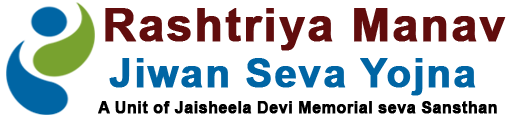
<style>
.page{position:relative;width:509px;height:122px;background:#ffffff}
.page>*{position:absolute;margin:0}
.t1{font:46px "Arial-BoldMT";letter-spacing:0.03em;color:#610d0d;font-weight:bold}
.t2{font:40px "Arial-BoldMT";letter-spacing:0.03em;color:#0065a4;font-weight:bold}
.t3{font:16px "Arial-BoldMT";letter-spacing:0.01em;color:#000000;font-weight:bold}
</style>
<div class="page">
<p class="t1" style="left:105px;top:8px;width:401px;height:43px">Rashtriya Manav</p>
<p class="t2" style="left:109px;top:58px;width:367px;height:38px">Jiwan Seva Yojna</p>
<p class="t3" style="left:98px;top:101px;width:399px;height:13px">A Unit of Jaisheela Devi Memorial seva Sansthan</p>
</div>
